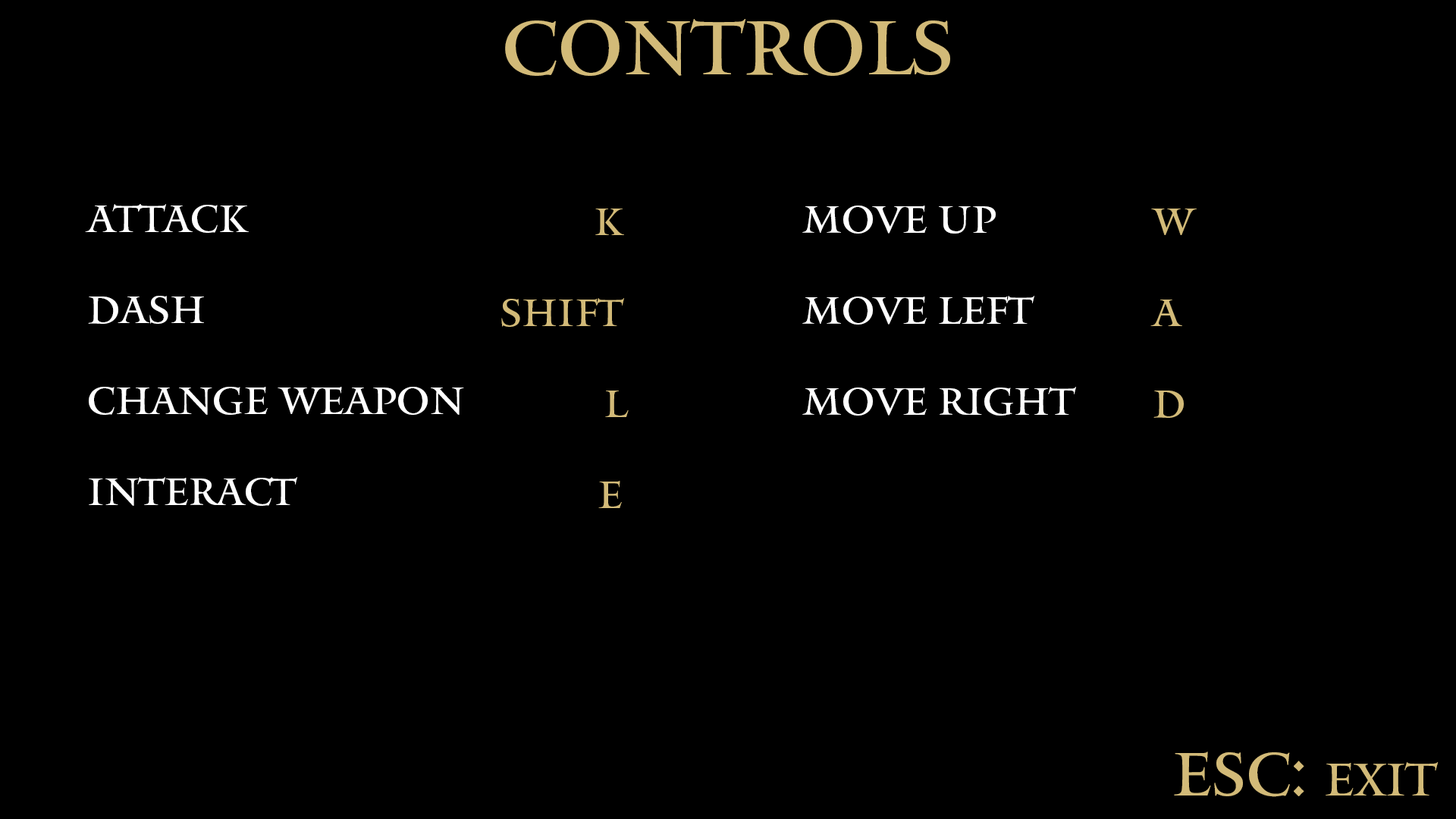
<style>
.page{position:relative;width:1456px;height:819px;background:#000000}
.page>*{position:absolute;margin:0}
.t1{font:75.8px "Mantinia";color:#d2ba78}
.t2{font:37.9px "Mantinia";color:#ffffff}
.t3{font:37.9px "Mantinia";color:#d2ba78}
.t4{font:60.7px "Mantinia";color:#d2ba78}
.t5{font:45.5px "Mantinia";color:#d2ba78}
</style>
<div class="page">
<p class="t1" style="left:505px;top:19px;width:445px;height:57px">CONTROLS</p>
<p class="t2" style="left:85px;top:204px;width:379px;height:302px">ATTACK<br><br>DASH<br><br>CHANGE WEAPON<br><br>INTERACT</p>
<p class="t3" style="left:501px;top:209px;width:128px;height:299px;text-align:right">K<br><br>SHIFT<br><br>L<br><br>E</p>
<p class="t2" style="left:802px;top:206px;width:274px;height:210px">MOVE UP<br><br>MOVE LEFT<br><br>MOVE RIGHT</p>
<p class="t3" style="left:1150px;top:209px;width:47px;height:209px">W<br><br>A<br><br>D</p>
<p class="t4" style="left:1174px;top:751px;width:265px;height:46px">ESC: <span class="t5">EXIT</span></p>
</div>
